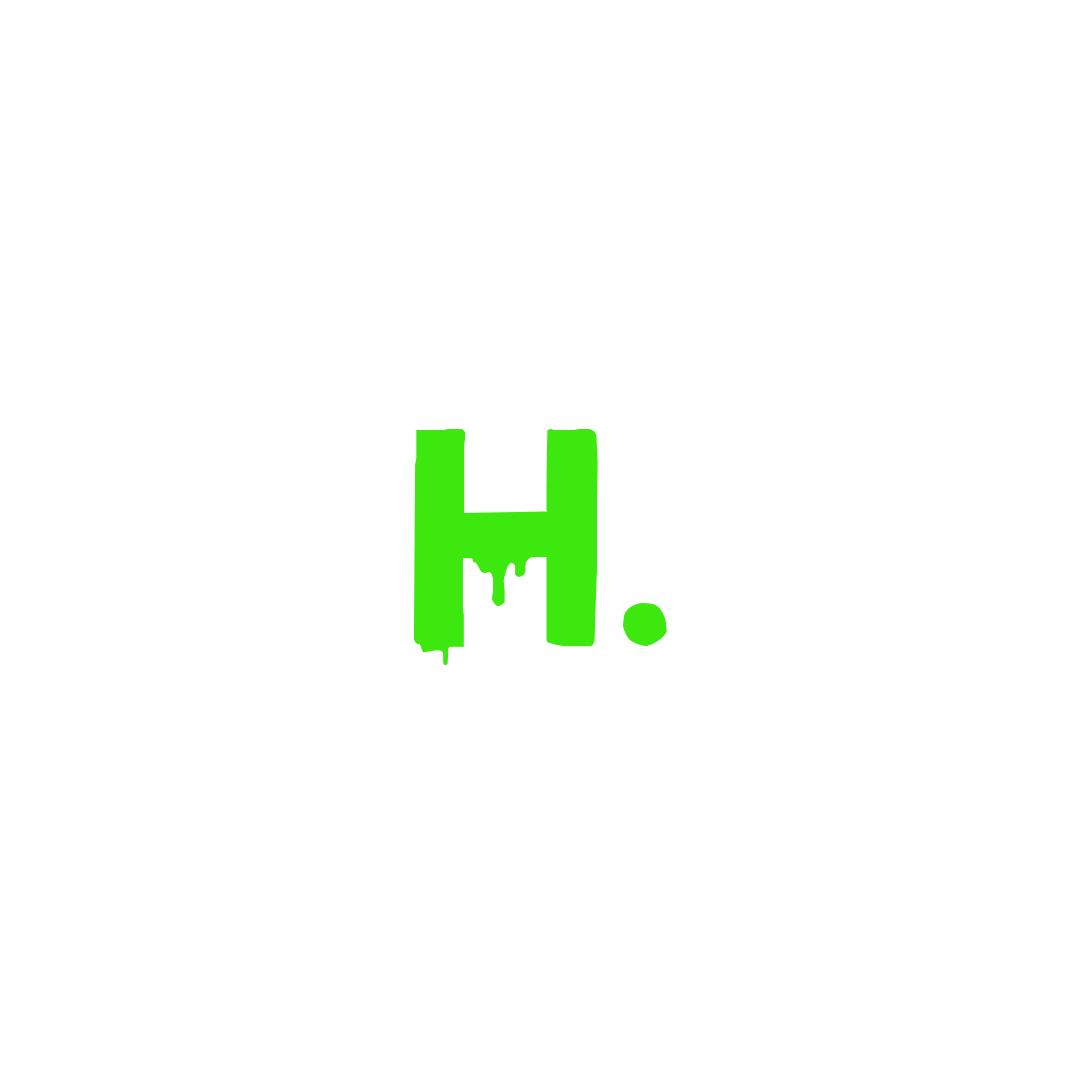
<style>
.page{position:relative;width:1080px;height:1080px;background:#ffffff}
.page>*{position:absolute;margin:0}
.t1{font:301.9px "CFHalloween-Regular";color:#3de80f}
</style>
<div class="page">
<p class="t1" style="left:413px;top:429px;width:254px;height:236px">H.</p>
</div>
